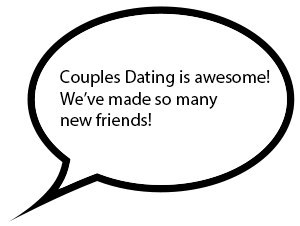
<style>
.page{position:relative;width:300px;height:226px;background:#ffffff}
.page>*{position:absolute;margin:0}
.t1{font:18px "MyriadPro-Regular";color:#000000}
</style>
<div class="page">
<p class="t1" style="left:60px;top:70px;width:210px;height:56px">Couples Dating is awesome!<br>We’ve made so many <br>new friends!</p>
</div>
